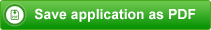
<style>
.page{position:relative;width:211px;height:30px}
.page>*{position:absolute;margin:0}
.t1{font:14px "Arial-BoldMT";color:#ffffff}
</style>
<div class="page">
<p class="t1" style="left:34px;top:8px;width:162px;height:14px">Save application as PDF</p>
</div>
